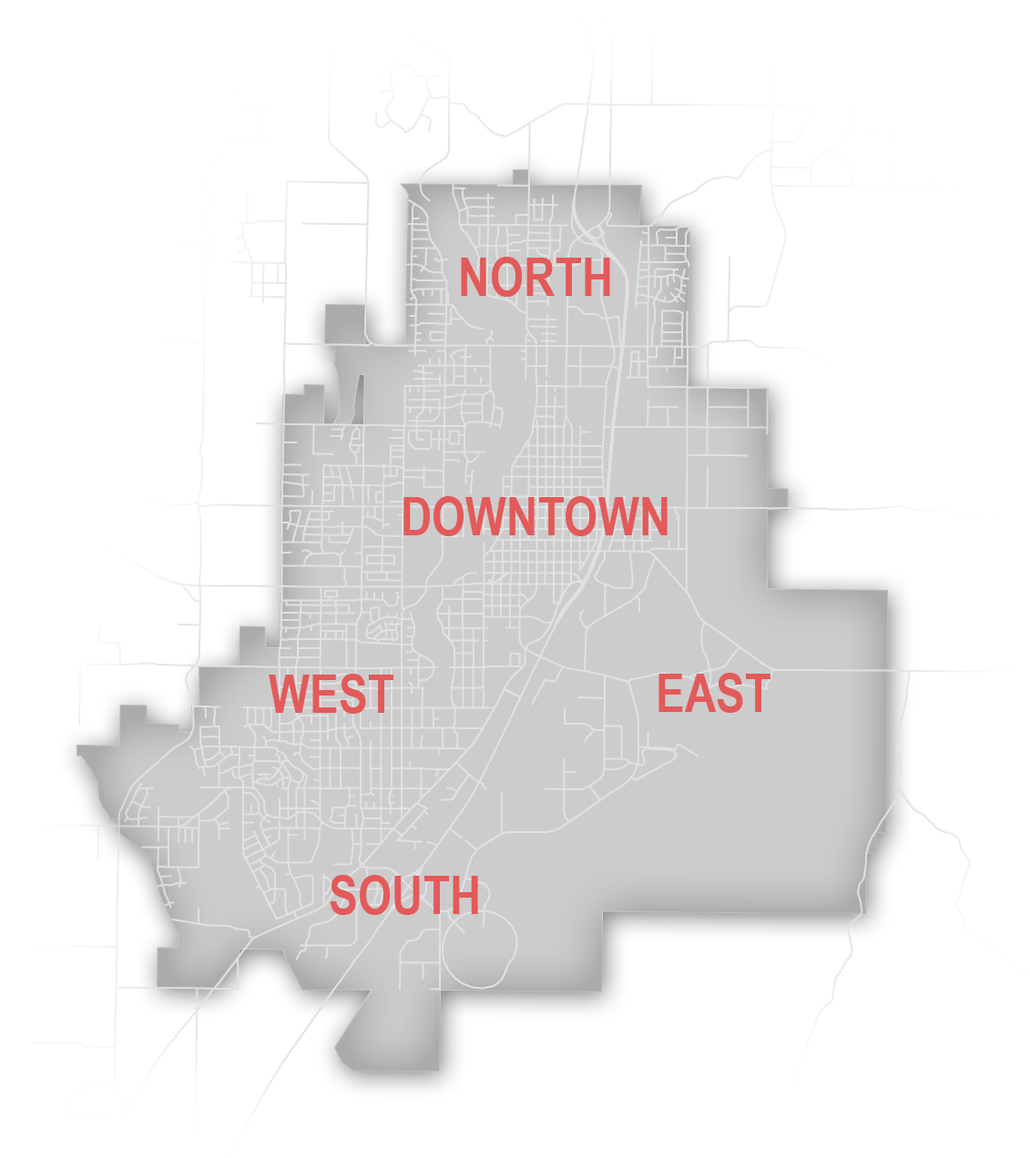
<style>
.page{position:relative;width:1030px;height:1158px;background:#ffffff}
.page>*{position:absolute;margin:0}
.t1{font:53.1px "ArialNarrow-Bold";color:#e25a5a}
</style>
<div class="page">
<p class="t1" style="left:461px;top:257px;width:149px;height:40px">NORTH</p>
<p class="t1" style="left:403px;top:496px;width:264px;height:40px">DOWNTOWN</p>
<p class="t1" style="left:269px;top:674px;width:124px;height:40px">WEST</p>
<p class="t1" style="left:658px;top:673px;width:112px;height:40px">EAST</p>
<p class="t1" style="left:330px;top:875px;width:148px;height:40px">SOUTH</p>
</div>
